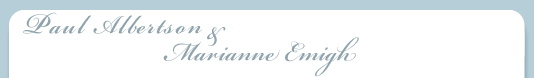
<style>
.page{position:relative;width:534px;height:78px;background:#ffffff}
.page>*{position:absolute;margin:0}
.t1{font:40px "BickhamScriptPro-Semibold";letter-spacing:0.06em;color:#8fa3ac;scale:0.84 1}
.t2{font:45px "BickhamScriptPro-Semibold";letter-spacing:0.06em;color:#8fa3ac;scale:0.84 1}
.t3{font:40px "BickhamScriptPro-Semibold";letter-spacing:-0.12em;color:#8fa3ac;scale:0.84 1}
.t4{font:40px "BickhamScriptPro-Semibold";letter-spacing:0.02em;color:#8fa3ac;scale:0.84 1}
</style>
<div class="page">
<p class="t1" style="left:23px;top:12px;width:180px;height:22px"><span class="t2">P</span>aul Albertson</p>
<p class="t3" style="left:207px;top:27px;width:19px;height:19px">&amp;</p>
<p class="t4" style="left:163px;top:37px;width:196px;height:40px"><span class="t3"><br></span>Marianne Emigh</p>
</div>
